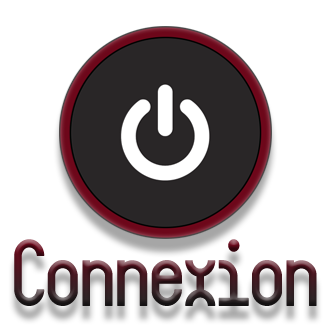
<style>
.page{position:relative;width:331px;height:331px;background:#ffffff}
.page>*{position:absolute;margin:0}
.t1{font:83.3px "Targa";scale:0.9 1}
</style>
<div class="page">
<p class="t1" style="left:14px;top:239px;width:303px;height:67px">Connexion</p>
</div>
